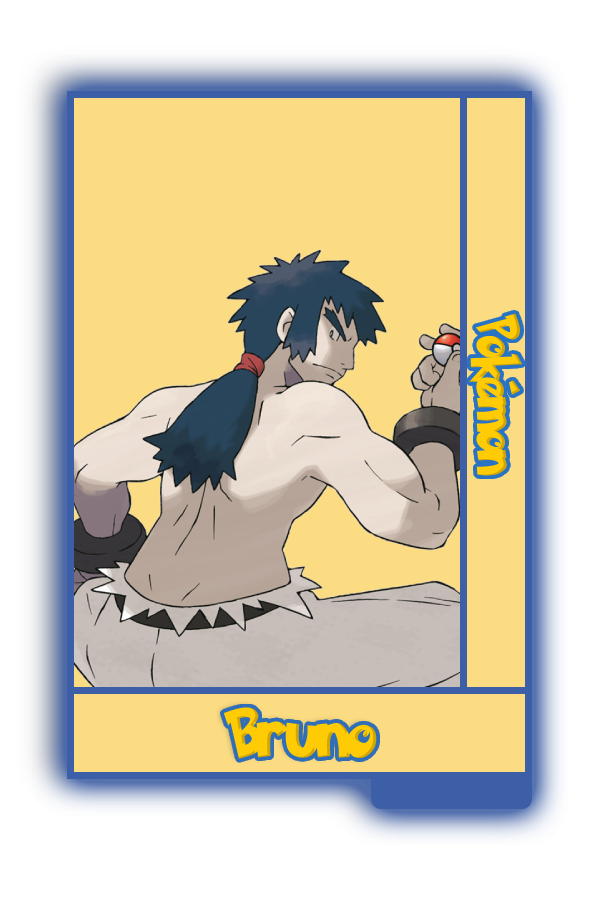
<style>
.page{position:relative;width:600px;height:900px;background:#fbdc83}
.page>*{position:absolute;margin:0}
.t1{font:48.8px "PokemonSolidNormal";color:#ffcb05;scale:0.8 1}
.t2{font:56.6px "PokemonSolidNormal";color:#ffcb05;scale:0.92 1}
</style>
<div class="page">
<p class="t1" style="left:469px;top:313px;width:54px;height:163px;rotate:90deg">Pokémon</p>
<p class="t2" style="left:223px;top:707px;width:154px;height:52px">Bruno</p>
</div>
